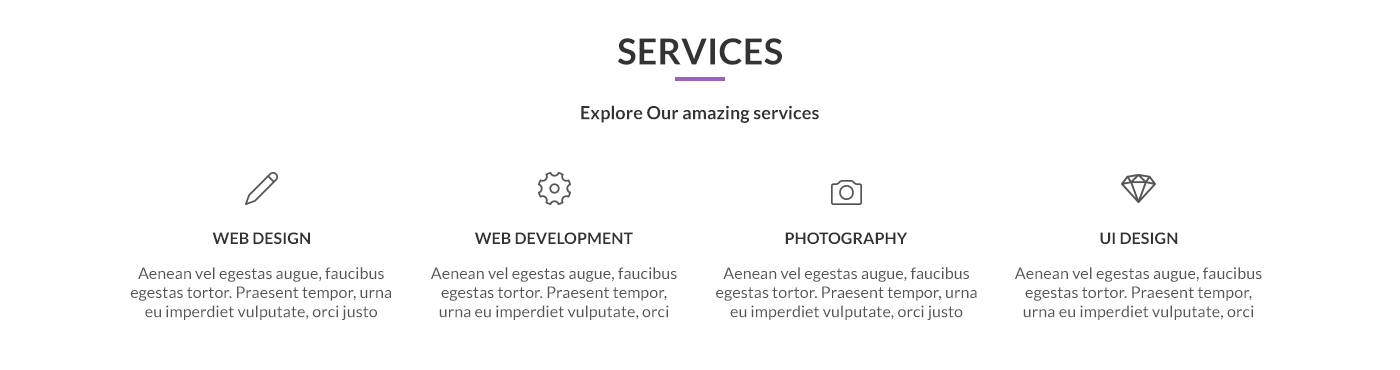
<style>
.page{position:relative;width:1400px;height:370px;background:#ffffff}
.page>*{position:absolute;margin:0}
.t1{font:36px "Lato-Bold";letter-spacing:0.005em;color:#333333}
.t2{font:18px "Lato-Bold";letter-spacing:0.005em;color:#333333}
.t3{font:16px "Lato-Bold";letter-spacing:0.005em;color:#333333}
.t4{font:16px "Lato-Regular";letter-spacing:0.005em;color:#555555}
</style>
<div class="page">
<p class="t1" style="left:618px;top:38px;width:164px;height:27px">SERVICES</p>
<p class="t2" style="left:581px;top:105px;width:238px;height:18px">Explore Our amazing services</p>
<p class="t3" style="left:212px;top:232px;width:98px;height:12px">WEB DESIGN</p>
<p class="t3" style="left:475px;top:232px;width:158px;height:12px">WEB DEVELOPMENT</p>
<p class="t3" style="left:785px;top:232px;width:123px;height:12px">PHOTOGRAPHY</p>
<p class="t3" style="left:1100px;top:232px;width:78px;height:12px">UI DESIGN</p>
<p class="t4" style="left:130px;top:267px;width:261px;height:53px;text-align:center">Aenean vel egestas augue, faucibus egestas tortor. Praesent tempor, urna eu imperdiet vulputate, orci justo sodales</p>
<p class="t4" style="left:431px;top:267px;width:246px;height:53px;text-align:center">Aenean vel egestas augue, faucibus egestas tortor. Praesent tempor, urna eu imperdiet vulputate, orci justo sodales</p>
<p class="t4" style="left:716px;top:267px;width:261px;height:53px;text-align:center">Aenean vel egestas augue, faucibus egestas tortor. Praesent tempor, urna eu imperdiet vulputate, orci justo sodales</p>
<p class="t4" style="left:1015px;top:267px;width:247px;height:53px;text-align:center">Aenean vel egestas augue, faucibus egestas tortor. Praesent tempor, urna eu imperdiet vulputate, orci justo sodales</p>
</div>
